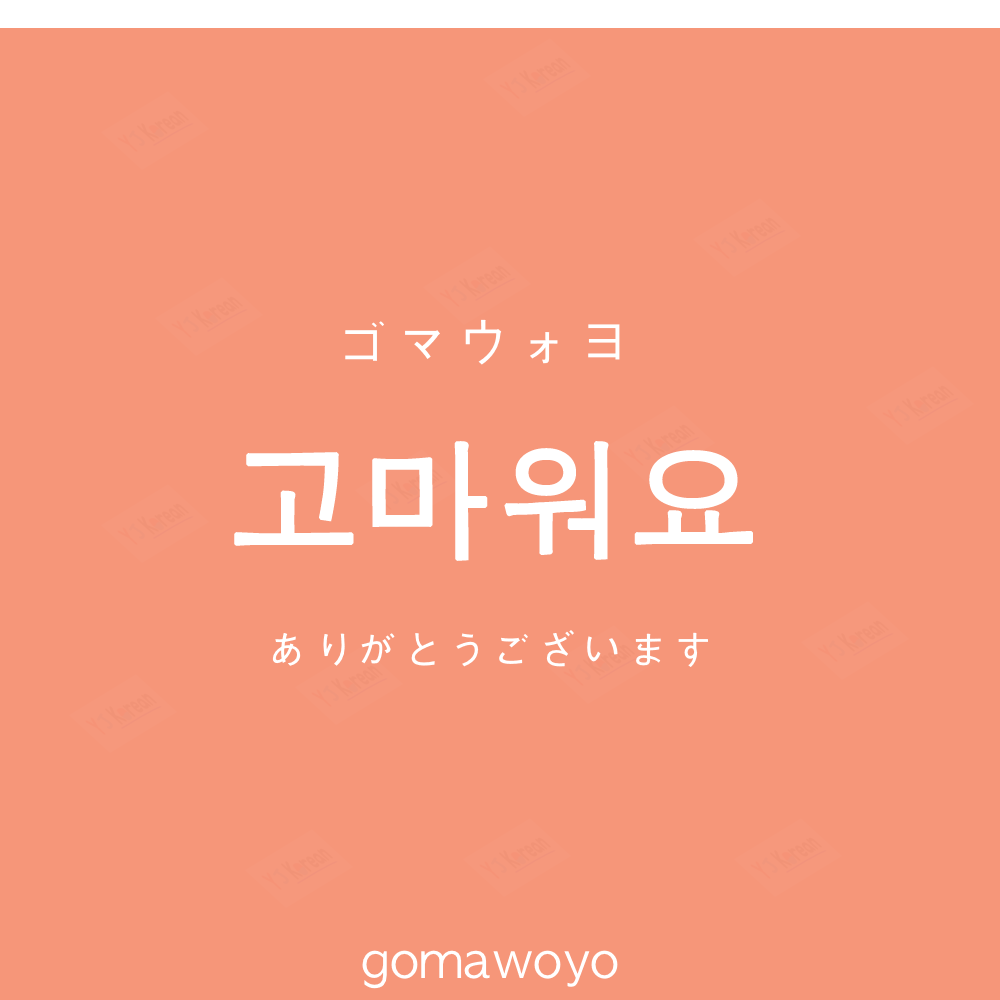
<style>
.page{position:relative;width:1000px;height:1000px;background:#f69679}
.page>*{position:absolute;margin:0}
.t1{font:60px "AppleGothic";color:#ffffff}
.t2{font:130px "AppleGothic";color:#ffffff;font-weight:bold}
.t3{font:45px "AppleGothic";color:#ffffff}
.t4{font:50px "AppleGothic";color:#ffffff}
</style>
<div class="page">
<p class="t1" style="left:345px;top:319px;width:275px;height:46px">ゴマウォヨ</p>
<p class="t2" style="left:234px;top:441px;width:519px;height:120px">고마워요</p>
<p class="t3" style="left:272px;top:630px;width:436px;height:37px">ありがとうございます</p>
<p class="t4" style="left:362px;top:950px;width:256px;height:39px">gomawoyo</p>
</div>
